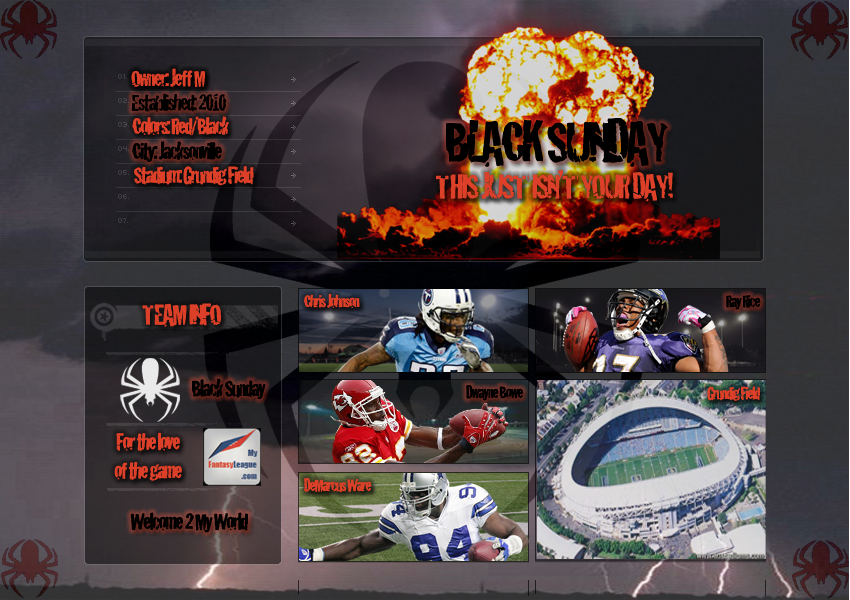
<style>
.page{position:relative;width:850px;height:600px}
.page>*{position:absolute;margin:0}
.t1{font:24px "Cracked";letter-spacing:-0.075em;color:#dd4028}
.t2{font:24px "Cracked";letter-spacing:-0.075em;color:#000000}
.t3{font:36px "Cracked";letter-spacing:-0.075em;color:#dd4028}
.t4{font:18px "Cracked";letter-spacing:-0.075em;color:#dd4028}
.t5{font:30px "Cracked";letter-spacing:-0.075em;color:#dd4028}
.t6{font:18px "Cracked";letter-spacing:-0.075em;color:#000000}
</style>
<div class="page">
<p class="t1" style="left:131px;top:68px;width:74px;height:20px">Owner: Jeff M</p>
<p class="t1" style="left:131px;top:68px;width:74px;height:20px">Owner: Jeff M</p>
<p class="t2" style="left:131px;top:93px;width:96px;height:19px">Established: 2010</p>
<p class="t1" style="left:132px;top:116px;width:97px;height:20px">Colors: Red/Black</p>
<p class="t2" style="left:132px;top:141px;width:90px;height:21px">City: Jacksonville</p>
<p class="t1" style="left:134px;top:166px;width:120px;height:20px">Stadium: Grundig Field</p>
<p class="t3" style="left:435px;top:170px;width:238px;height:32px">THIS JUST ISN’T YOUR DAY!</p>
<p class="t4" style="left:304px;top:293px;width:56px;height:15px">Chris Johnson</p>
<p class="t5" style="left:142px;top:303px;width:80px;height:24px">TEAM INFO</p>
<p class="t6" style="left:726px;top:295px;width:35px;height:15px">Ray Rice</p>
<p class="t2" style="left:192px;top:378px;width:74px;height:22px">Black Sunday</p>
<p class="t6" style="left:466px;top:385px;width:58px;height:16px">Dwayne Bowe</p>
<p class="t4" style="left:707px;top:386px;width:53px;height:15px">Grundig Field</p>
<p class="t1" style="left:114px;top:432px;width:68px;height:49px;text-align:center">For the love<br>of the game</p>
<p class="t4" style="left:304px;top:478px;width:68px;height:15px">DeMarcus Ware</p>
<p class="t2" style="left:130px;top:512px;width:118px;height:21px">Welcome 2 My World</p>
</div>
